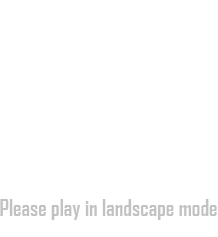
<style>
.page{position:relative;width:218px;height:237px;background:#ffffff}
.page>*{position:absolute;margin:0}
.t1{font:21.5px "AgencyFB-Bold";color:#c2c2c2}
</style>
<div class="page">
<p class="t1" style="left:0px;top:199px;width:217px;height:21px">Please play in landscape mode</p>
</div>
